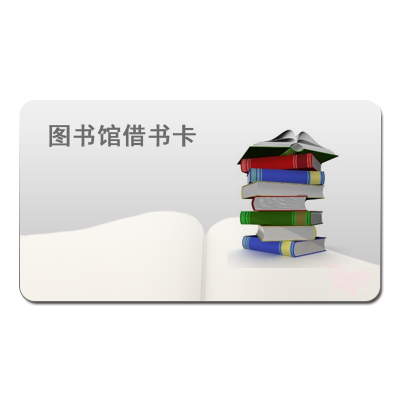
<style>
.page{position:relative;width:400px;height:400px;background:#ffffff}
.page>*{position:absolute;margin:0}
.t1{font:24px "SimHei";color:#6b6b6b;font-weight:bold}
</style>
<div class="page">
<p class="t1" style="left:49px;top:124px;width:147px;height:23px">图书馆借书卡</p>
</div>
